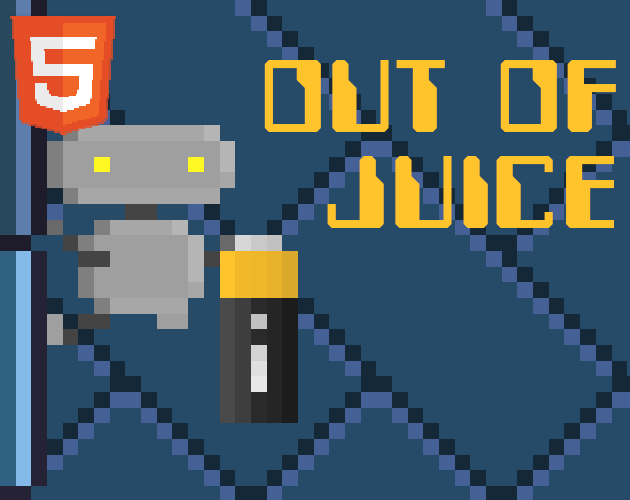
<style>
.page{position:relative;width:630px;height:500px;background:#264b68}
.page>*{position:absolute;margin:0}
.t1{font:120px/18px "Computerfont";color:#ffc32b}
</style>
<div class="page">
<p class="t1" style="left:264px;top:60px;width:352px;height:168px;text-align:right">OUT OF<br><br><br>JUICE</p>
</div>
